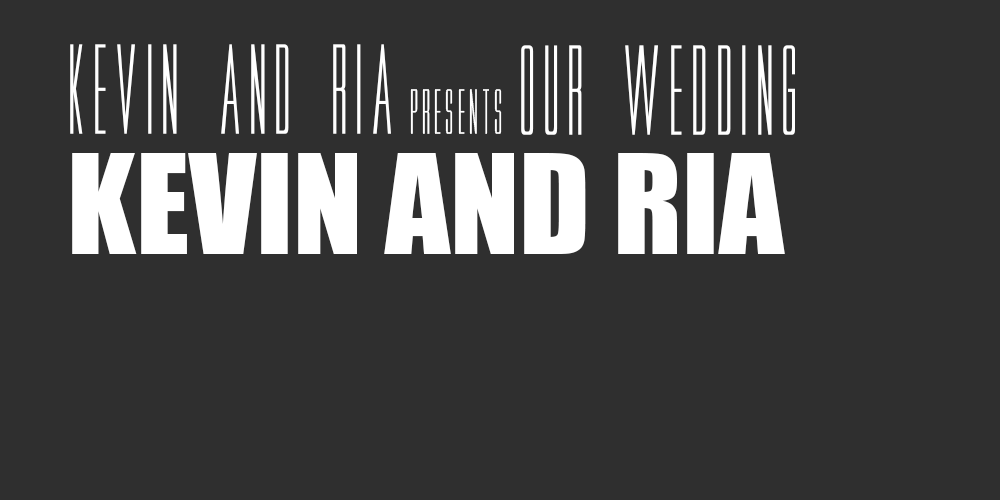
<style>
.page{position:relative;width:1000px;height:500px;background:#2f2f2f}
.page>*{position:absolute;margin:0}
.t1{font:128px "MovieLetters";color:#ffffff}
.t2{font:64px "MovieLetters";color:#ffffff}
.t3{font:128px "Impact";color:#ffffff}
</style>
<div class="page">
<p class="t1" style="left:70px;top:44px;width:321px;height:90px">KEVIN AND RIA</p>
<p class="t1" style="left:521px;top:45px;width:274px;height:90px">OUR WEDDING</p>
<p class="t2" style="left:410px;top:89px;width:92px;height:45px">PRESENTS</p>
<p class="t3" style="left:72px;top:153px;width:713px;height:101px">KEVIN AND RIA</p>
</div>
